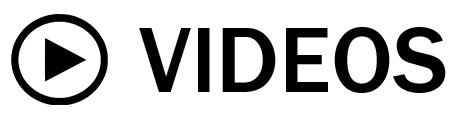
<style>
.page{position:relative;width:457px;height:120px;background:#ffffff}
.page>*{position:absolute;margin:0}
.t1{font:96.1px "FranklinGothic-Medium";color:#000000;text-transform:uppercase}
</style>
<div class="page">
<p class="t1" style="left:139px;top:27px;width:307px;height:66px">Videos</p>
</div>
